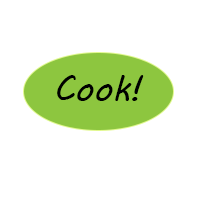
<style>
.page{position:relative;width:200px;height:200px;background:#ffffff}
.page>*{position:absolute;margin:0}
.t1{font:36px "MVBoli";color:#000000}
</style>
<div class="page">
<p class="t1" style="left:57px;top:75px;width:87px;height:26px">Cook!</p>
</div>
